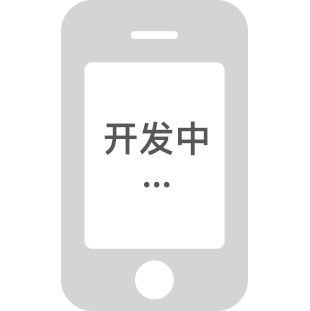
<style>
.page{position:relative;width:310px;height:311px;background:#ffffff}
.page>*{position:absolute;margin:0}
.t1{font:36px/36px "PingFangSC-Semibold";color:#575757}
</style>
<div class="page">
<p class="t1" style="left:104px;top:121px;width:104px;height:67px;text-align:center">开发中<br>...</p>
</div>
